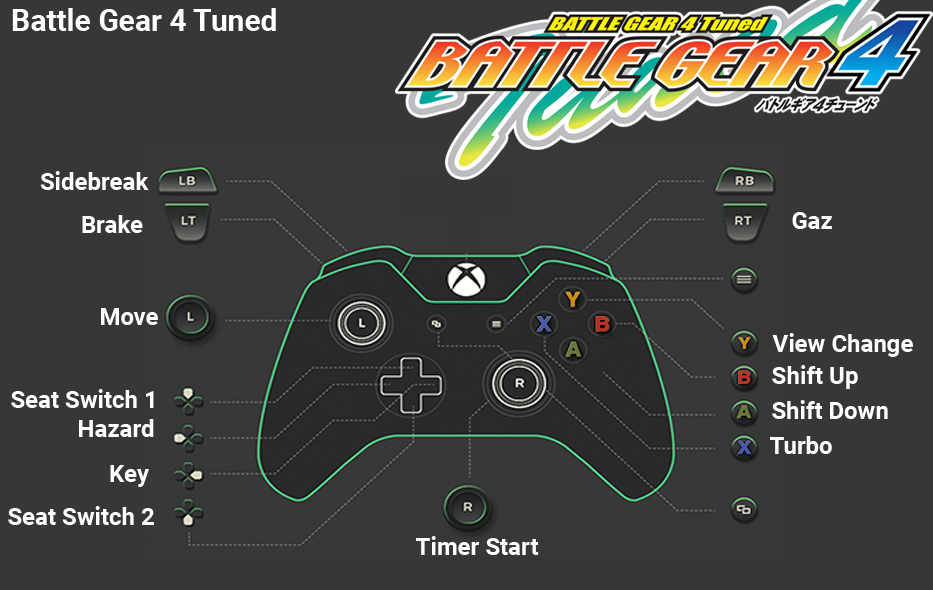
<style>
.page{position:relative;width:933px;height:590px;background:#363838}
.page>*{position:absolute;margin:0}
.t1{font:30px "Roboto-Bold";color:#ffffff}
.t2{font:24px "Roboto-Bold";color:#ffffff}
</style>
<div class="page">
<p class="t1" style="left:12px;top:8px;width:264px;height:23px">Battle Gear 4 Tuned</p>
<p class="t2" style="left:40px;top:171px;width:109px;height:19px">Sidebreak</p>
<p class="t2" style="left:82px;top:215px;width:61px;height:18px">Brake</p>
<p class="t2" style="left:792px;top:212px;width:40px;height:17px">Gaz</p>
<p class="t2" style="left:101px;top:308px;width:57px;height:17px">Move</p>
<p class="t2" style="left:772px;top:333px;width:141px;height:24px">View Change</p>
<p class="t2" style="left:772px;top:365px;width:86px;height:24px">Shift Up</p>
<p class="t2" style="left:11px;top:389px;width:143px;height:19px">Seat Switch 1</p>
<p class="t2" style="left:772px;top:400px;width:116px;height:19px">Shift Down</p>
<p class="t2" style="left:79px;top:419px;width:75px;height:18px">Hazard</p>
<p class="t2" style="left:770px;top:436px;width:62px;height:18px">Turbo</p>
<p class="t2" style="left:110px;top:465px;width:39px;height:22px">Key</p>
<p class="t2" style="left:8px;top:506px;width:146px;height:19px">Seat Switch 2</p>
<p class="t2" style="left:416px;top:536px;width:123px;height:19px">Timer Start</p>
</div>
